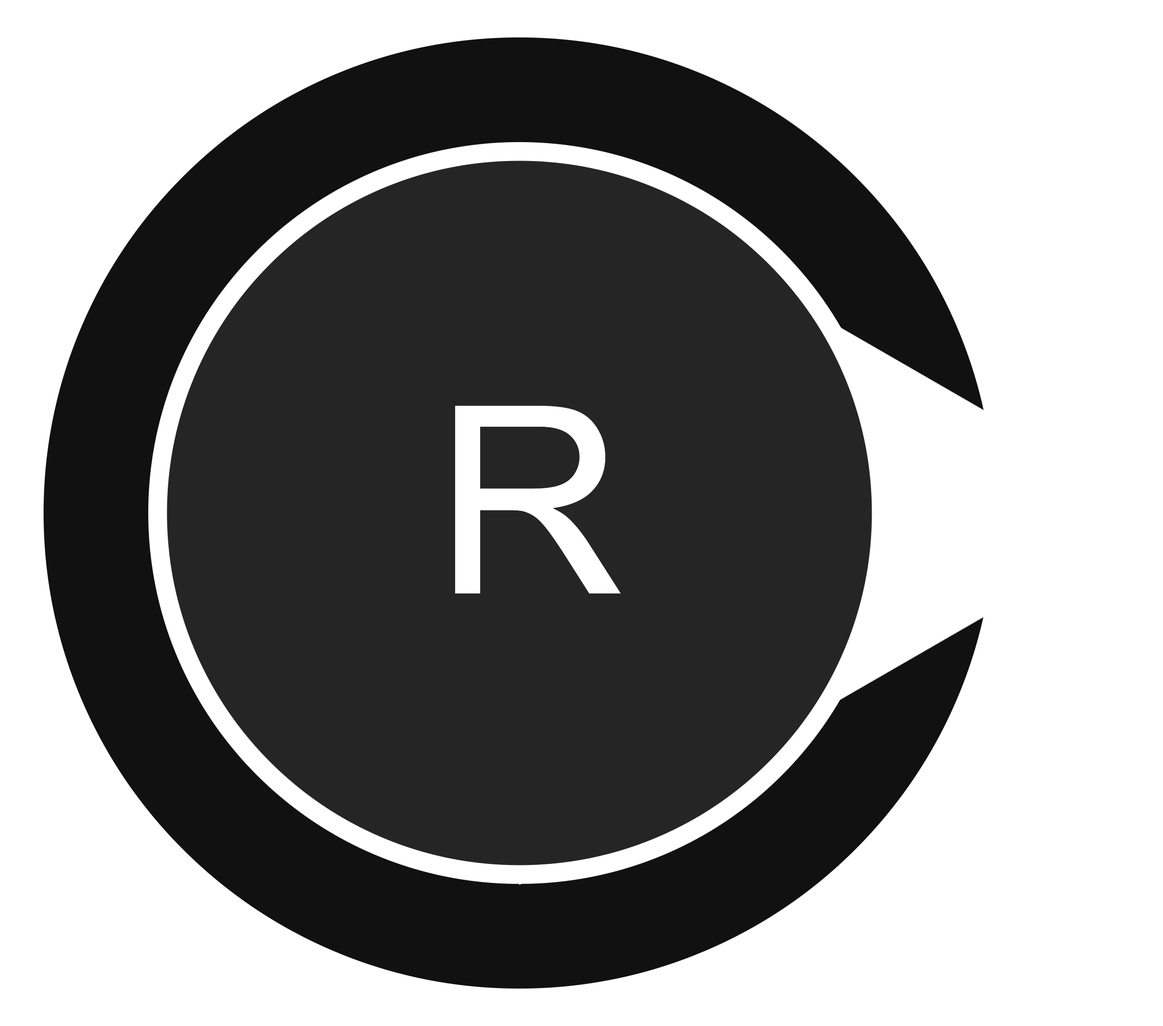
<style>
.page{position:relative;width:1163px;height:1026px;background:#ffffff}
.page>*{position:absolute;margin:0}
.t1{font:261.9px "ArialMT";color:#ffffff}
</style>
<div class="page">
<p class="t1" style="left:455px;top:406px;width:166px;height:187px">R</p>
</div>
